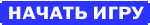
<style>
.page{position:relative;width:150px;height:25px;background:#2b35ff}
.page>*{position:absolute;margin:0}
.t1{font:18.1px "FranklinGothic-Demi";letter-spacing:0.03em;color:#ffffff;scale:1.2 1}
</style>
<div class="page">
<p class="t1" style="left:9px;top:6px;width:135px;height:13px">НАЧАТЬ ИГРУ</p>
</div>
